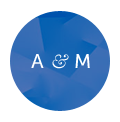
<style>
.page{position:relative;width:120px;height:122px;background:#ffffff}
.page>*{position:absolute;margin:0}
.t1{font:20px "MuseoSans-500";letter-spacing:0.05em;color:#ffffff;text-transform:uppercase}
.t2{font:20px "Baskerville-Italic";color:#ffffff;text-transform:uppercase}
</style>
<div class="page">
<p class="t1" style="left:31px;top:54px;width:59px;height:15px">a <span class="t2">&amp; </span>M</p>
</div>
